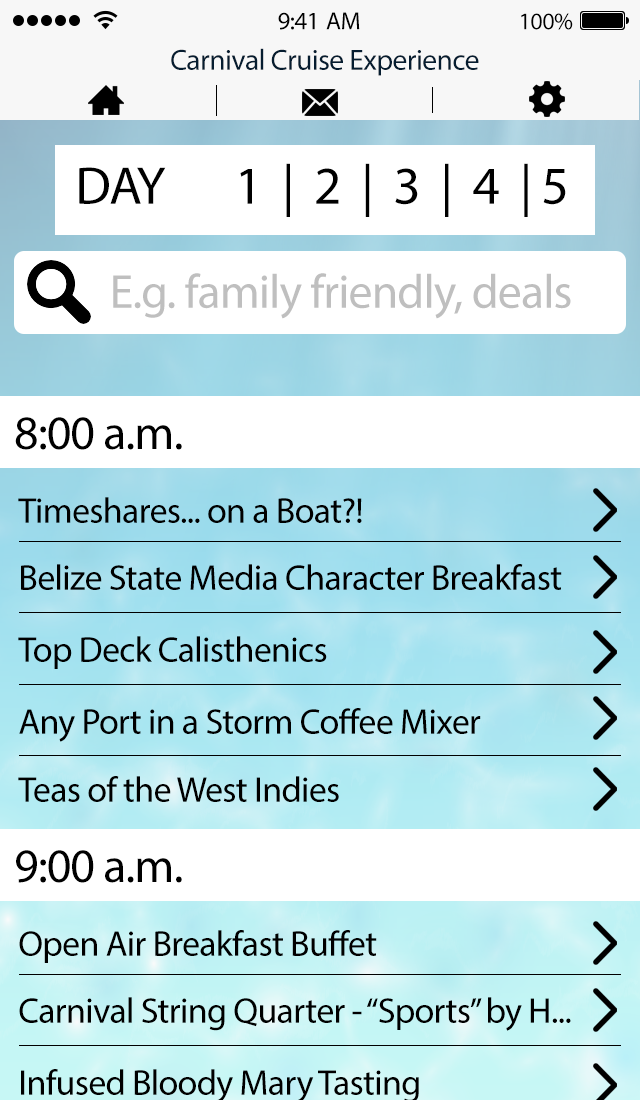
<style>
.page{position:relative;width:640px;height:1100px;background:#ffffff}
.page>*{position:absolute;margin:0}
.t1{font:25px "MyriadPro-Regular";letter-spacing:-0.02em;color:#000000}
.t2{font:24px "MyriadPro-Regular";letter-spacing:-0.02em;color:#000000}
.t3{font:29.4px "MyriadPro-Regular";letter-spacing:-0.02em;color:#061d30}
.t4{font:53.4px "MyriadPro-Regular";letter-spacing:-0.02em;color:#000000}
.t5{font:48px "MyriadPro-Regular";letter-spacing:-0.02em;color:#bfbfbf}
.t6{font:48px "MyriadPro-Regular";letter-spacing:-0.02em;color:#000000}
.t7{font:36px "MyriadPro-Regular";letter-spacing:-0.02em;color:#000000}
</style>
<div class="page">
<p class="t1" style="left:278px;top:12px;width:82px;height:18px">9:41 AM</p>
<p class="t2" style="left:521px;top:13px;width:52px;height:17px">100%</p>
<p class="t3" style="left:171px;top:48px;width:308px;height:28px">Carnival Cruise Experience</p>
<p class="t4" style="left:79px;top:163px;width:487px;height:54px">DAY 1  |  2  |  3  |  4  | 5</p>
<p class="t5" style="left:113px;top:273px;width:458px;height:46px">E.g. family friendly, deals</p>
<p class="t6" style="left:15px;top:417px;width:167px;height:33px">8:00 a.m.</p>
<p class="t7" style="left:18px;top:497px;width:344px;height:26px">Timeshares... on a Boat?!</p>
<p class="t7" style="left:21px;top:564px;width:541px;height:26px">Belize State Media Character Breakfast</p>
<p class="t7" style="left:18px;top:636px;width:309px;height:33px">Top Deck Calisthenics</p>
<p class="t7" style="left:19px;top:708px;width:462px;height:34px">Any Port in a Storm Coffee Mixer</p>
<p class="t7" style="left:18px;top:776px;width:321px;height:26px">Teas of the West Indies</p>
<p class="t6" style="left:16px;top:850px;width:166px;height:33px">9:00 a.m.</p>
<p class="t7" style="left:19px;top:930px;width:358px;height:33px">Open Air Breakfast Buffet</p>
<p class="t7" style="left:19px;top:997px;width:552px;height:34px">Carnival String Quarter - “Sports” by H...</p>
</div>
